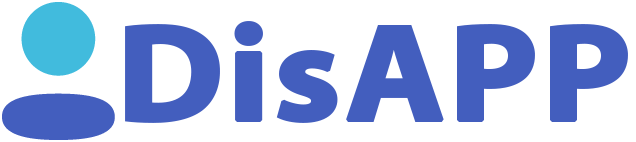
<style>
.page{position:relative;width:636px;height:142px;background:#ffffff}
.page>*{position:absolute;margin:0}
.t1{font:137.5px "MyriadPro-Bold";color:#435ebe;font-weight:bold;scale:1.11 1}
</style>
<div class="page">
<p class="t1" style="left:125px;top:21px;width:503px;height:102px">DisAPP</p>
</div>
